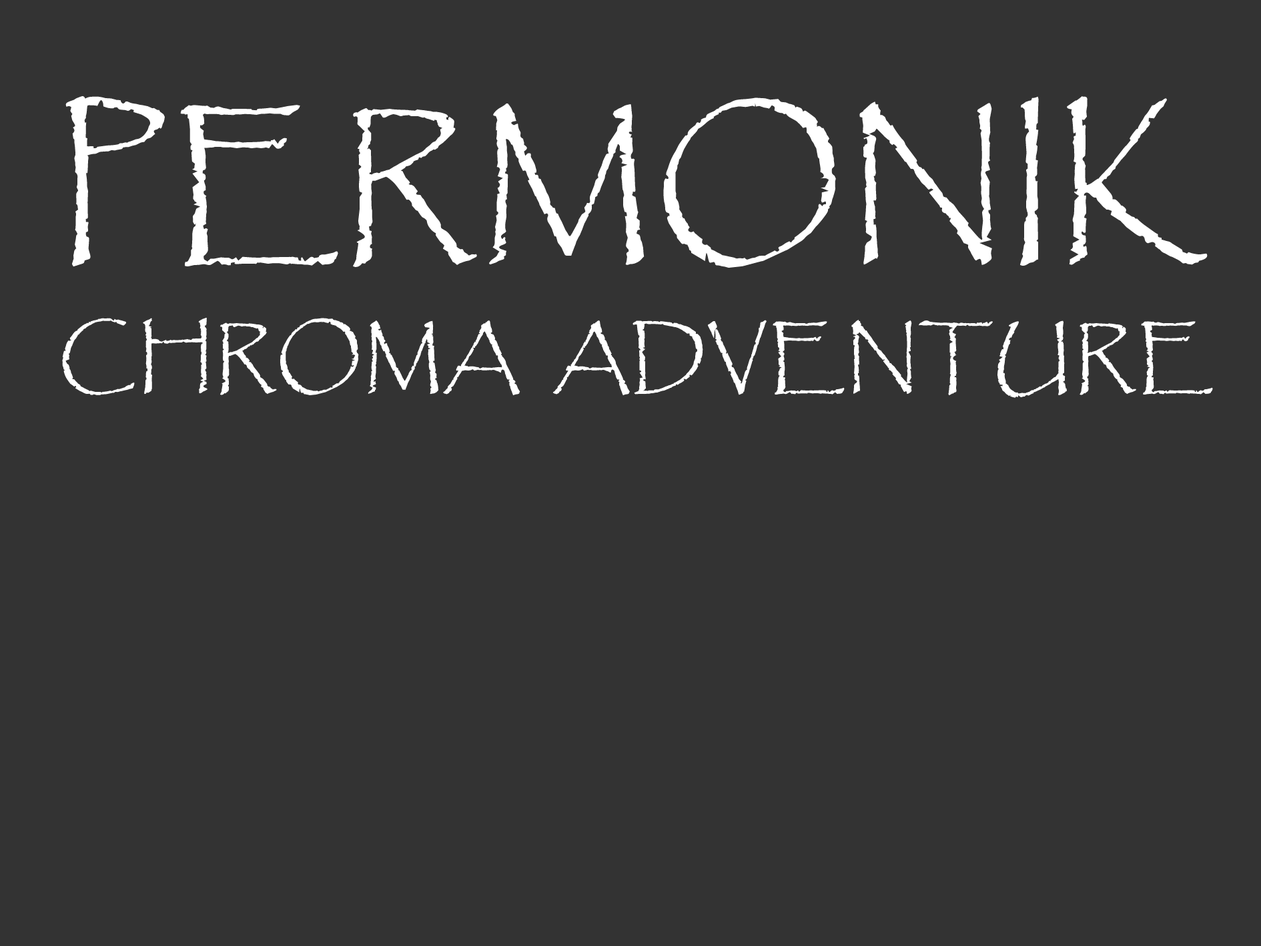
<style>
.page{position:relative;width:1261px;height:946px;background:#333333}
.page>*{position:absolute;margin:0}
.t1{font:173.1px "Papyrus-Regular";color:#ffffff;text-transform:uppercase}
.t2{font:78.5px "Papyrus-Regular";color:#ffffff;text-transform:uppercase}
</style>
<div class="page">
<p class="t1" style="left:65px;top:96px;width:1143px;height:172px">Permonik</p>
<p class="t2" style="left:62px;top:318px;width:1151px;height:80px">chroma  adventure</p>
</div>
